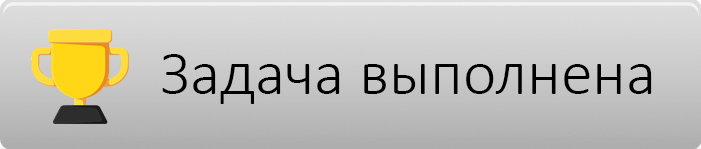
<style>
.page{position:relative;width:701px;height:149px}
.page>*{position:absolute;margin:0}
.t1{font:64px "Calibri-Light";color:#000000}
</style>
<div class="page">
<p class="t1" style="left:162px;top:54px;width:490px;height:50px">Задача выполнена</p>
</div>
